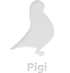
<style>
.page{position:relative;width:70px;height:73px;background:#ffffff}
.page>*{position:absolute;margin:0}
.t1{font:11.3px "Ubuntu-Bold";color:#d4d4d4}
</style>
<div class="page">
<p class="t1" style="left:27px;top:62px;width:20px;height:12px">Pigi</p>
</div>
